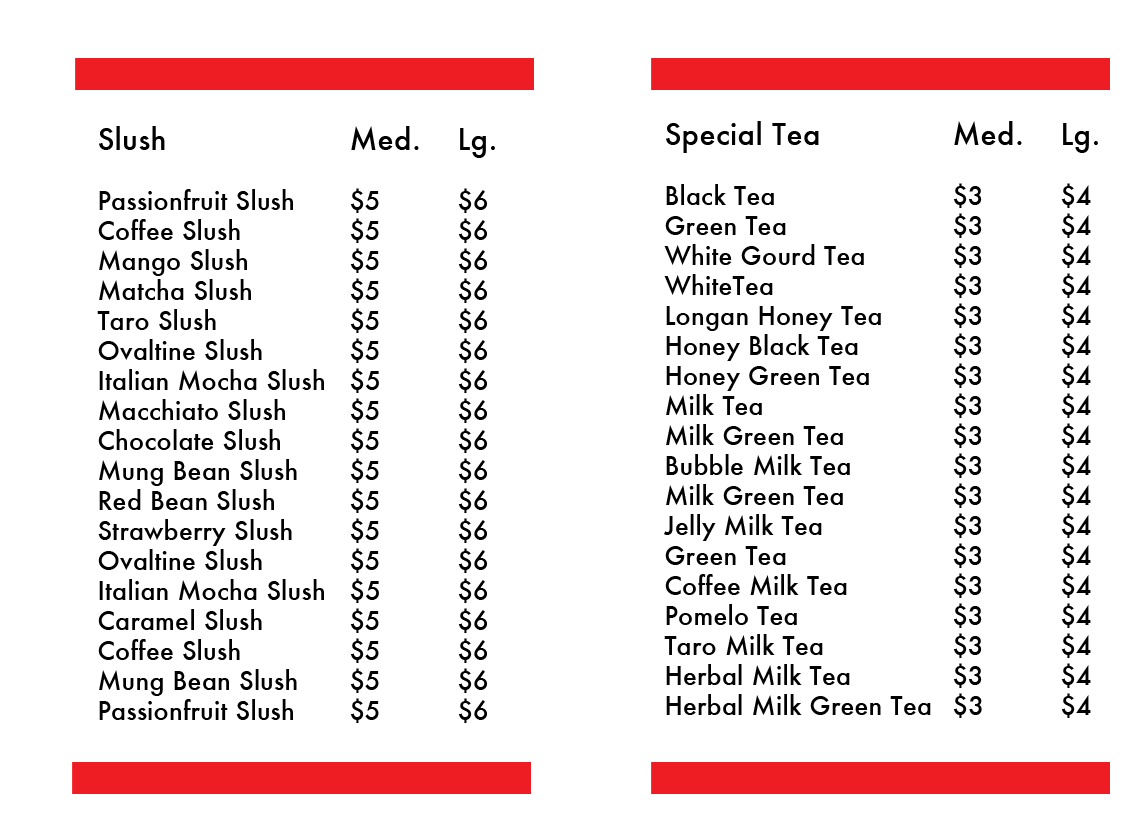
<style>
.page{position:relative;width:1140px;height:813px;background:#ffffff}
.page>*{position:absolute;margin:0}
.t1{font:25px "Futura-Medium";letter-spacing:0.01em;color:#000000}
.t2{font:29.2px "Futura-Medium";letter-spacing:0.01em;color:#000000}
</style>
<div class="page">
<p class="t1" style="left:97px;top:126px;width:398px;height:597px"><span class="t2">Slush       Med.  Lg.<br></span><br>Passionfruit Slush  $5   $6<br>Coffee Slush    $5   $6<br>Mango Slush   $5   $6<br>Matcha Slush   $5   $6<br>Taro Slush    $5   $6<br>Ovaltine Slush   $5   $6<br>Italian Mocha Slush $5   $6<br>Macchiato Slush  $5   $6<br>Chocolate Slush  $5   $6<br>Mung Bean Slush  $5   $6<br>Red Bean Slush   $5   $6<br>Strawberry Slush  $5   $6<br>Ovaltine Slush   $5   $6<br>Italian Mocha Slush $5   $6<br>Caramel Slush   $5   $6<br>Coffee Slush    $5   $6<br>Mung Bean Slush  $5   $6<br>Passionfruit Slush  $5   $6</p>
<p class="t1" style="left:664px;top:121px;width:434px;height:597px"><span class="t2">Special Tea     Med.  Lg.<br></span><br>Black Tea     $3   $4<br>Green Tea     $3   $4<br>White Gourd Tea   $3   $4<br>WhiteTea     $3   $4 <br>Longan Honey Tea  $3   $4<br>Honey Black Tea   $3   $4<br>Honey Green Tea   $3   $4<br>Milk Tea      $3   $4<br>Milk Green Tea   $3   $4<br>Bubble Milk Tea   $3   $4<br>Milk Green Tea   $3   $4<br>Jelly Milk Tea    $3   $4<br>Green Tea     $3   $4<br>Coffee Milk Tea   $3   $4<br>Pomelo Tea     $3   $4<br>Taro Milk Tea    $3   $4<br>Herbal Milk Tea   $3   $4<br>Herbal Milk Green Tea $3   $4</p>
</div>
